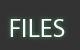
<style>
.page{position:relative;width:80px;height:50px;background:#333333}
.page>*{position:absolute;margin:0}
.t1{font:26px "MyriadPro-Regular";color:#ffffff;text-transform:uppercase}
</style>
<div class="page">
<p class="t1" style="left:10px;top:19px;width:55px;height:18px">FILES</p>
</div>
